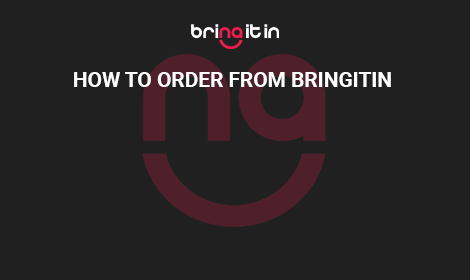
<style>
.page{position:relative;width:470px;height:280px;background:#202020}
.page>*{position:absolute;margin:0}
.t1{font:20.8px "Roboto-Bold";color:#ffffff}
</style>
<div class="page">
<p class="t1" style="left:74px;top:72px;width:317px;height:15px">HOW TO ORDER FROM BRINGITIN</p>
</div>
